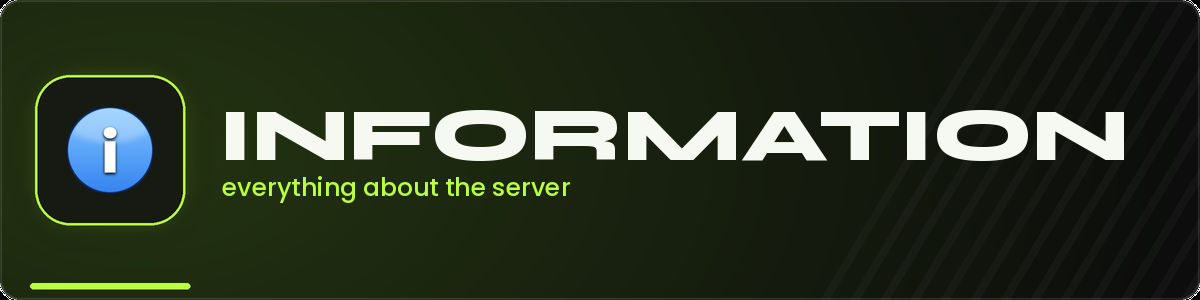
<style>
.page{position:relative;width:1200px;height:300px}
.page>*{position:absolute;margin:0}
.t1{font:75px "Syne-ExtraBold";color:#f6f8f2}
.t2{font:25px "Poppins-Medium";color:#baff40}
</style>
<div class="page">
<p class="t1" style="left:226px;top:110px;width:898px;height:51px">INFORMATION</p>
<p class="t2" style="left:222px;top:176px;width:348px;height:27px">everything about the server</p>
</div>
